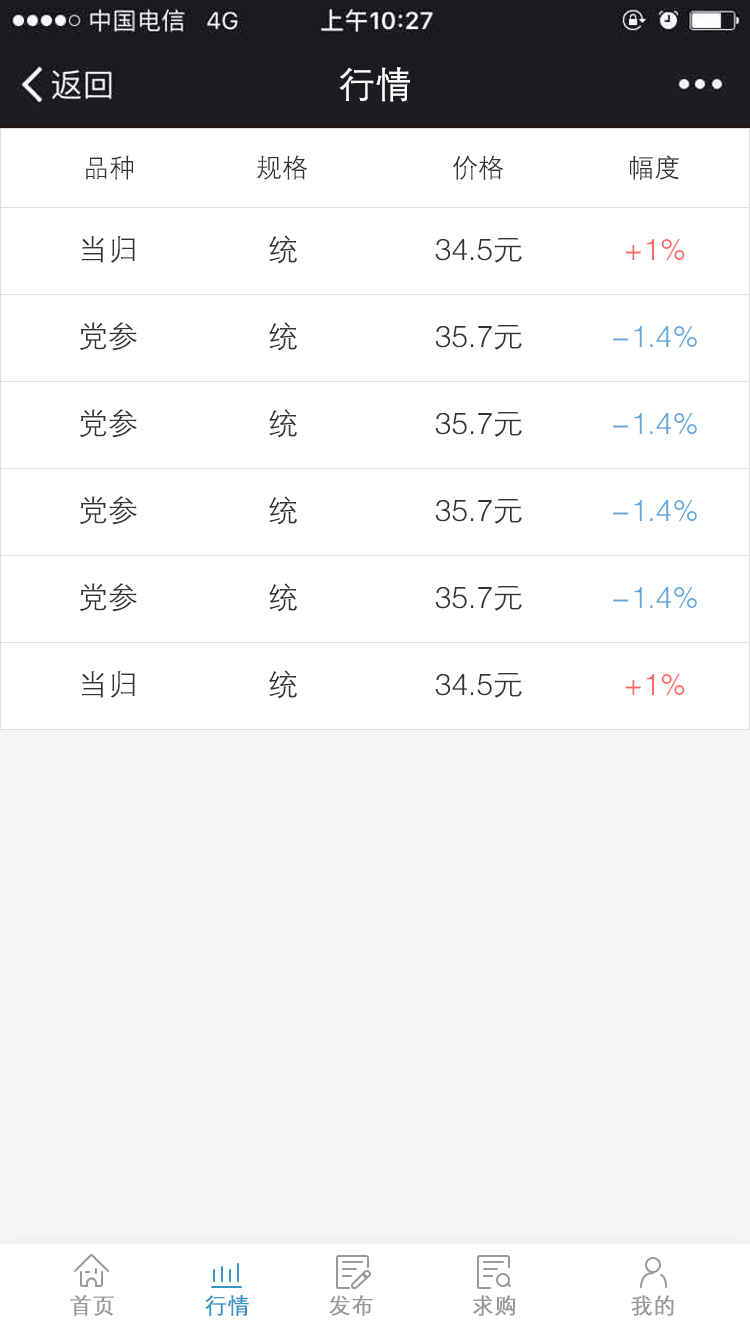
<style>
.page{position:relative;width:750px;height:1334px;background:#ffffff}
.page>*{position:absolute;margin:0}
.t1{font:36px "FZZDXJW--GB1-0";color:#ffffff;font-weight:bold}
.t2{font:26px "FZZDXJW--GB1-0";color:#333333}
.t3{font:30px "FZZDXJW--GB1-0";color:#333333}
.t4{font:30px "FZZDXJW--GB1-0";color:#ff6565}
.t5{font:30px "FZZDXJW--GB1-0";color:#5fa7de}
.t6{font:22px "FZZDXJW--GB1-0";color:#999999;font-weight:bold}
.t7{font:22px "FZZDXJW--GB1-0";color:#3b95c8;font-weight:bold}
</style>
<div class="page">
<p class="t1" style="left:339px;top:67px;width:71px;height:35px">行情</p>
<p class="t2" style="left:86px;top:155px;width:48px;height:25px">品种</p>
<p class="t2" style="left:256px;top:155px;width:52px;height:25px">规格</p>
<p class="t2" style="left:452px;top:155px;width:52px;height:25px">价格</p>
<p class="t2" style="left:630px;top:155px;width:49px;height:25px">幅度</p>
<p class="t3" style="left:82px;top:236px;width:53px;height:27px">当归</p>
<p class="t3" style="left:269px;top:235px;width:28px;height:29px">统</p>
<p class="t3" style="left:435px;top:237px;width:87px;height:26px">34.5元</p>
<p class="t4" style="left:625px;top:239px;width:60px;height:22px">+1%</p>
<p class="t3" style="left:79px;top:322px;width:58px;height:29px">党参</p>
<p class="t3" style="left:269px;top:322px;width:28px;height:29px">统</p>
<p class="t3" style="left:435px;top:324px;width:87px;height:26px">35.7元</p>
<p class="t5" style="left:613px;top:326px;width:84px;height:22px">-1.4%</p>
<p class="t3" style="left:79px;top:409px;width:58px;height:29px">党参</p>
<p class="t3" style="left:269px;top:409px;width:28px;height:29px">统</p>
<p class="t3" style="left:435px;top:411px;width:87px;height:26px">35.7元</p>
<p class="t5" style="left:613px;top:413px;width:84px;height:22px">-1.4%</p>
<p class="t3" style="left:79px;top:496px;width:58px;height:29px">党参</p>
<p class="t3" style="left:269px;top:496px;width:28px;height:29px">统</p>
<p class="t3" style="left:435px;top:498px;width:87px;height:26px">35.7元</p>
<p class="t5" style="left:613px;top:500px;width:84px;height:22px">-1.4%</p>
<p class="t3" style="left:79px;top:583px;width:58px;height:29px">党参</p>
<p class="t3" style="left:269px;top:583px;width:28px;height:29px">统</p>
<p class="t3" style="left:435px;top:585px;width:87px;height:26px">35.7元</p>
<p class="t5" style="left:613px;top:587px;width:84px;height:22px">-1.4%</p>
<p class="t3" style="left:82px;top:671px;width:53px;height:27px">当归</p>
<p class="t3" style="left:269px;top:670px;width:28px;height:29px">统</p>
<p class="t3" style="left:435px;top:672px;width:87px;height:26px">34.5元</p>
<p class="t4" style="left:625px;top:674px;width:60px;height:22px">+1%</p>
<p class="t6" style="left:70px;top:1295px;width:44px;height:21px">首页</p>
<p class="t7" style="left:205px;top:1295px;width:44px;height:21px">行情</p>
<p class="t6" style="left:329px;top:1295px;width:44px;height:21px">发布</p>
<p class="t6" style="left:473px;top:1295px;width:43px;height:21px">求购</p>
<p class="t6" style="left:631px;top:1295px;width:43px;height:21px">我的</p>
</div>
